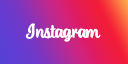
<style>
.page{position:relative;width:128px;height:64px}
.page>*{position:absolute;margin:0}
.t1{font:17.7px "FONTSPRINGDEMO-BlueVinylRegular";color:#ffffff}
</style>
<div class="page">
<p class="t1" style="left:25px;top:23px;width:76px;height:19px">Instagram</p>
</div>
